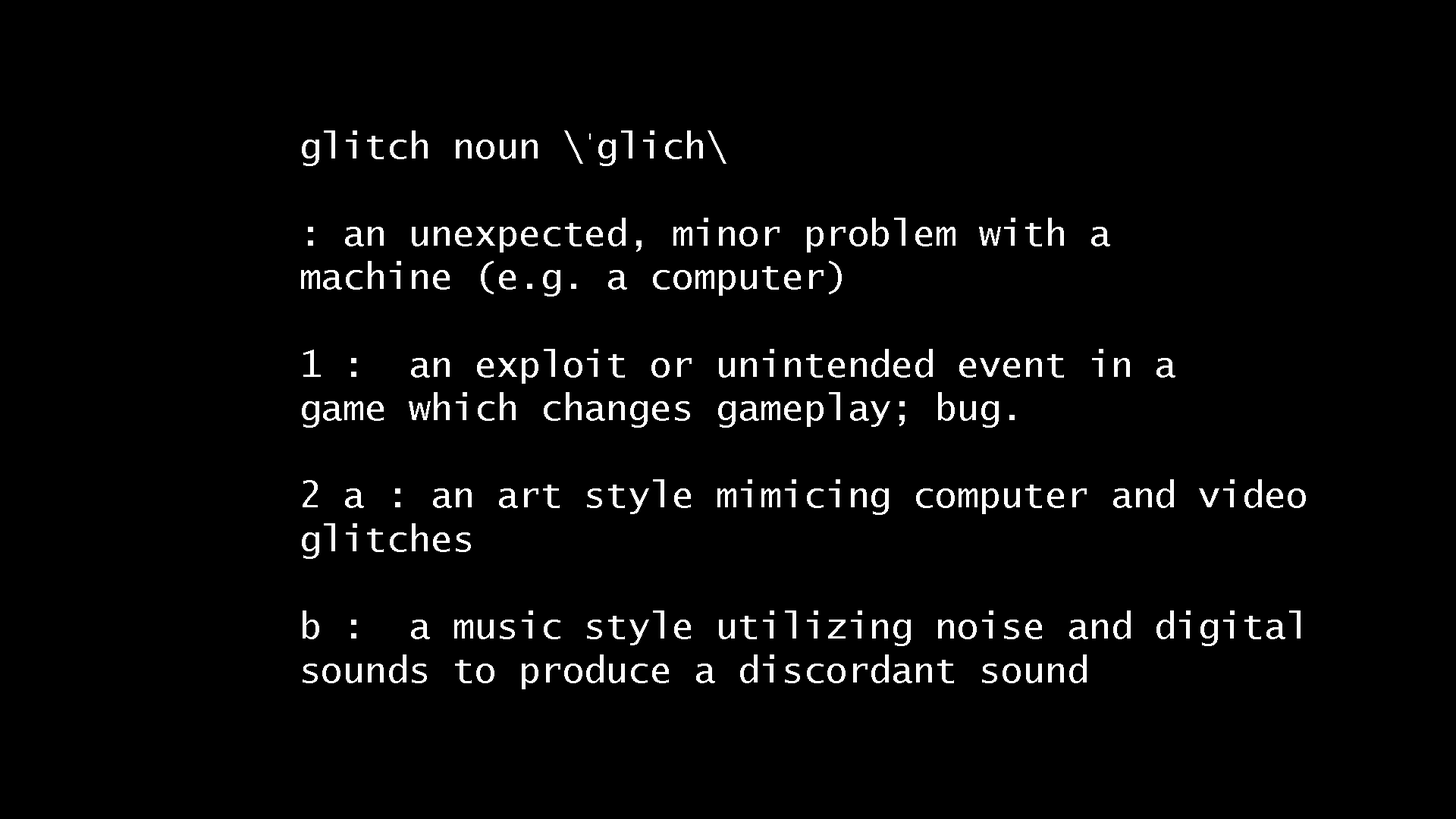
<style>
.page{position:relative;width:1456px;height:819px;background:#000000}
.page>*{position:absolute;margin:0}
.t1{font:36.4px "LucidaConsole";color:#ffffff}
.t2{font:36.4px "TimesNewRomanPSMT";color:#ffffff}
</style>
<div class="page">
<p class="t1" style="left:301px;top:130px;width:1005px;height:559px">glitch noun \<span class="t2">ˈ</span>glich\<br><br>: an unexpected, minor problem with a <br>machine (e.g. a computer)<br><br>1 :  an exploit or unintended event in a <br>game which changes gameplay; bug. <br><br>2 a : an art style mimicing computer and video <br>glitches<br><br>b :  a music style utilizing noise and digital <br>sounds to produce a discordant sound</p>
</div>
